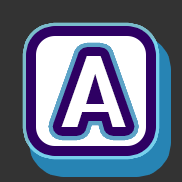
<style>
.page{position:relative;width:182px;height:182px;background:#333333}
.page>*{position:absolute;margin:0}
.t1{font:97.1px "BMHANNA11yrsold";color:#ffffff}
</style>
<div class="page">
<p class="t1" style="left:61px;top:56px;width:65px;height:71px">A</p>
</div>
